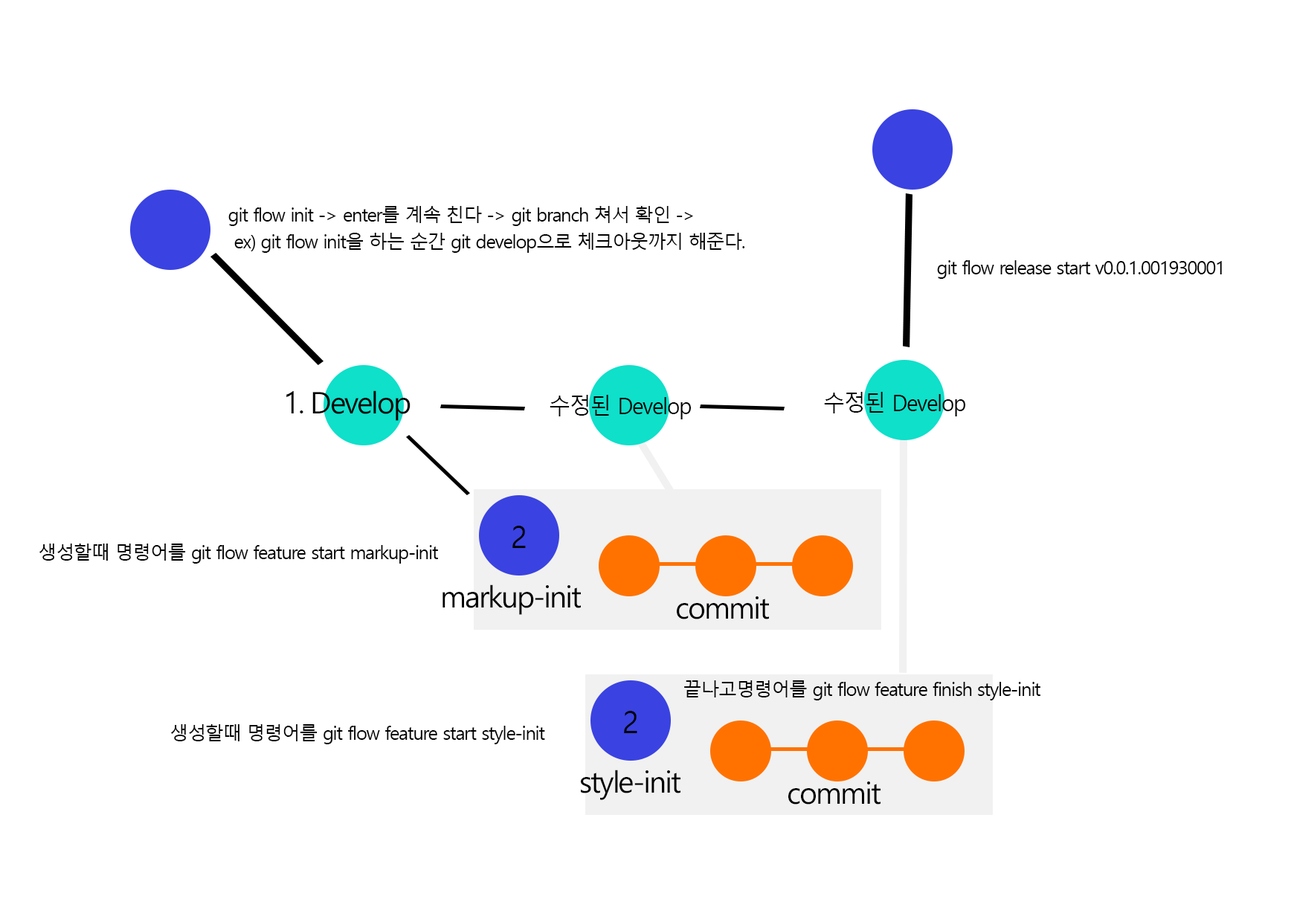
<style>
.page{position:relative;width:1294px;height:922px;background:#ffffff}
.page>*{position:absolute;margin:0}
.t1{font:18.6px/26.8px "MalgunGothicRegular";letter-spacing:-0.05em;color:#000000}
.t2{font:18.6px "MalgunGothicRegular";letter-spacing:-0.05em;color:#000000}
.t3{font:30.4px "MalgunGothicRegular";letter-spacing:-0.05em;color:#000000}
.t4{font:29.7px "MalgunGothicRegular";letter-spacing:-0.05em;color:#000000}
.t5{font:22.3px "MalgunGothicRegular";letter-spacing:-0.05em;color:#000000}
</style>
<div class="page">
<p class="t1" style="left:228px;top:206px;width:517px;height:47px">git flow init -&gt; enter를 계속 친다 -&gt; git branch 쳐서 확인 -&gt;<br> ex) git flow init을 하는 순간 git develop으로 체크아웃까지 해준다.</p>
<p class="t2" style="left:937px;top:260px;width:284px;height:19px">git flow release start v0.0.1.001930001</p>
<p class="t3" style="left:286px;top:391px;width:17px;height:22px">1.</p>
<p class="t4" style="left:312px;top:390px;width:98px;height:31px">Develop</p>
<p class="t5" style="left:549px;top:395px;width:142px;height:24px">수정된 Develop</p>
<p class="t5" style="left:824px;top:392px;width:141px;height:24px">수정된 Develop</p>
<p class="t3" style="left:512px;top:526px;width:14px;height:22px">2</p>
<p class="t2" style="left:39px;top:543px;width:399px;height:21px">생성할때 명령어를 git flow feature start markup-init</p>
<p class="t4" style="left:442px;top:584px;width:139px;height:31px">markup-init</p>
<p class="t4" style="left:677px;top:596px;width:92px;height:23px">commit</p>
<p class="t2" style="left:684px;top:680px;width:356px;height:20px">끝나고명령어를 git flow feature finish style-init</p>
<p class="t3" style="left:624px;top:711px;width:13px;height:22px">2</p>
<p class="t2" style="left:171px;top:724px;width:374px;height:20px">생성할때 명령어를 git flow feature start style-init</p>
<p class="t4" style="left:581px;top:769px;width:99px;height:31px">style-init</p>
<p class="t4" style="left:788px;top:781px;width:92px;height:23px">commit</p>
</div>
